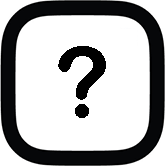
<style>
.page{position:relative;width:166px;height:166px;background:#ffffff}
.page>*{position:absolute;margin:0}
.t1{font:98px "ArialRoundedMTBold";color:#000000}
</style>
<div class="page">
<p class="t1" style="left:58px;top:46px;width:48px;height:72px">?</p>
</div>
